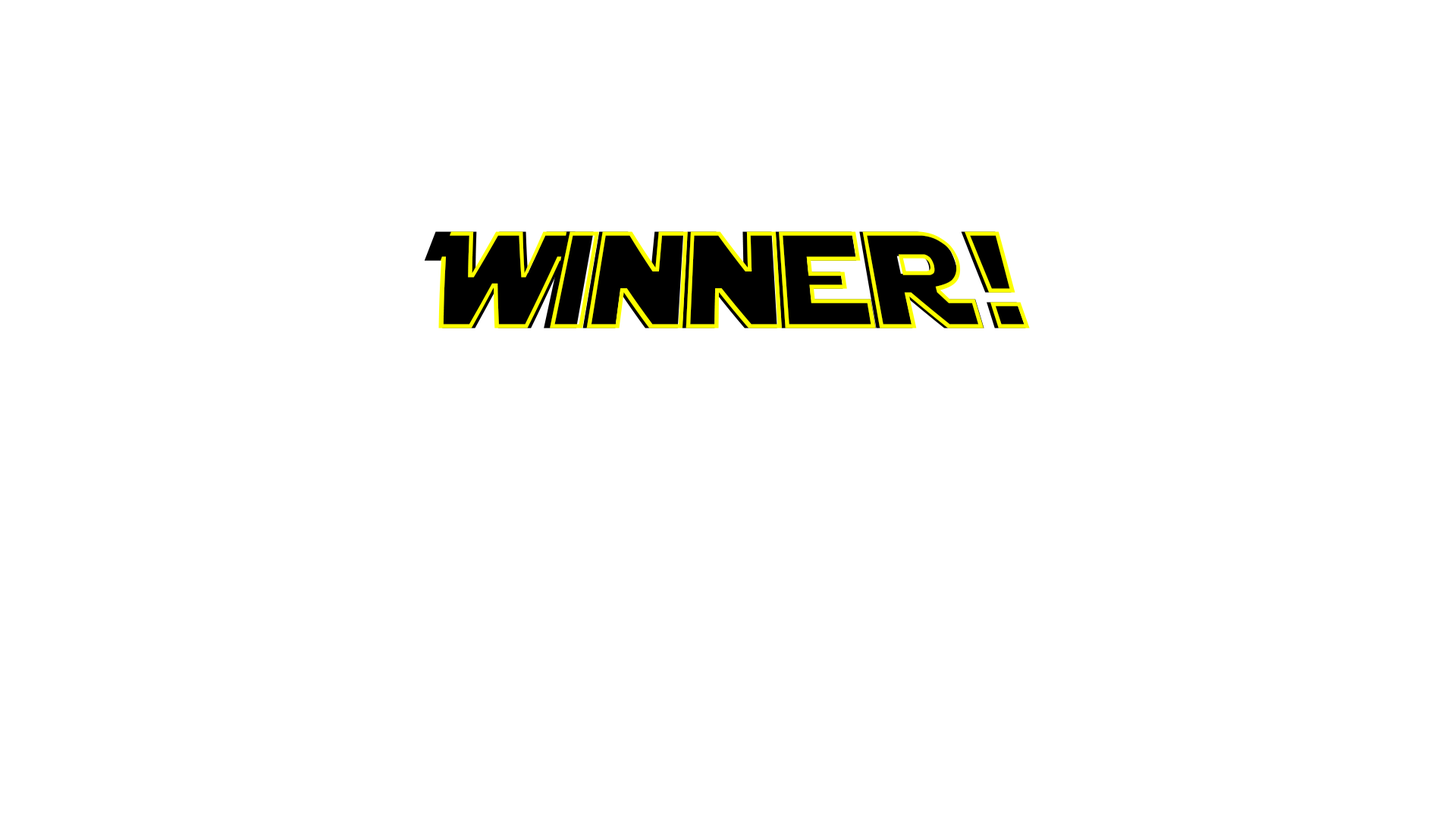
<style>
.page{position:relative;width:1456px;height:819px;background:#ffffff}
.page>*{position:absolute;margin:0}
.t1{font:136.5px "StarJedi";color:#000000}
.t2{font:136.5px "StarJediHollow";color:#fcff00}
</style>
<div class="page">
<p class="t1" style="left:424px;top:231px;width:602px;height:97px">Winner!</p>
<p class="t2" style="left:438px;top:231px;width:592px;height:97px">Winner!</p>
</div>
